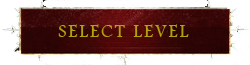
<style>
.page{position:relative;width:250px;height:65px;background:#ffffff}
.page>*{position:absolute;margin:0}
.t1{font:19px "FootlightMTLight";letter-spacing:0.1em;color:#b0a30d}
</style>
<div class="page">
<p class="t1" style="left:58px;top:24px;width:131px;height:13px">SELECT LEVEL</p>
</div>
